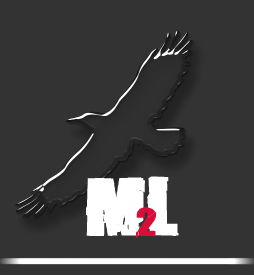
<style>
.page{position:relative;width:254px;height:275px;background:#333333}
.page>*{position:absolute;margin:0}
.t1{font:100px "BREAKIT";color:#ffffff}
.t2{font:48px "BREAKIT";color:#da0d38}
</style>
<div class="page">
<p class="t1" style="left:86px;top:177px;width:59px;height:59px">M</p>
<p class="t1" style="left:147px;top:176px;width:32px;height:60px">L</p>
<p class="t2" style="left:135px;top:207px;width:22px;height:31px">2</p>
</div>
